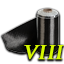
<style>
.page{position:relative;width:64px;height:64px;background:#ffffff}
.page>*{position:absolute;margin:0}
.t1{font:18px "TrajanPro-Bold";color:#d6f700;font-weight:bold;font-style:italic}
</style>
<div class="page">
<p class="t1" style="left:24px;top:45px;width:40px;height:15px">VIII</p>
</div>
